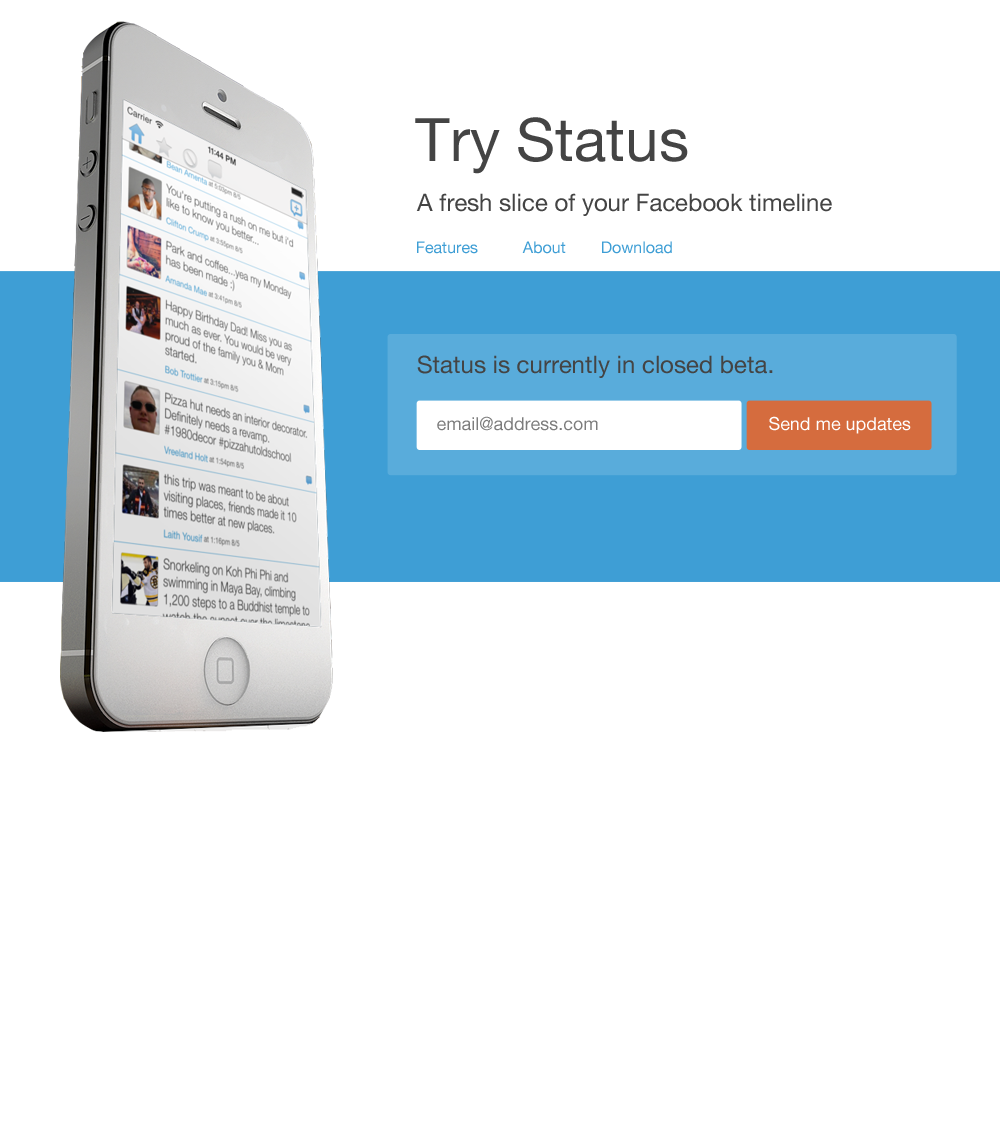
<style>
.page{position:relative;width:1000px;height:1136px;background:#ffffff}
.page>*{position:absolute;margin:0}
.t1{font:60px "HelveticaNeue";color:#444444}
.t2{font:24px "HelveticaNeue";color:#444444}
.t3{font:16px "HelveticaNeue";color:#3e9ed5}
.t4{font:18px "HelveticaNeue";color:#7c7b7b}
.t5{font:18px "HelveticaNeue";color:#ffffff}
</style>
<div class="page">
<p class="t1" style="left:415px;top:117px;width:273px;height:57px">Try Status</p>
<p class="t2" style="left:416px;top:193px;width:416px;height:23px">A fresh slice of your Facebook timeline</p>
<p class="t3" style="left:417px;top:241px;width:61px;height:13px">Features</p>
<p class="t3" style="left:522px;top:241px;width:44px;height:13px">About</p>
<p class="t3" style="left:602px;top:241px;width:70px;height:13px">Download</p>
<p class="t2" style="left:417px;top:355px;width:356px;height:23px">Status is currently in closed beta.</p>
<p class="t4" style="left:437px;top:416px;width:161px;height:15px">email@address.com</p>
<p class="t5" style="left:769px;top:416px;width:142px;height:18px">Send me updates</p>
</div>
